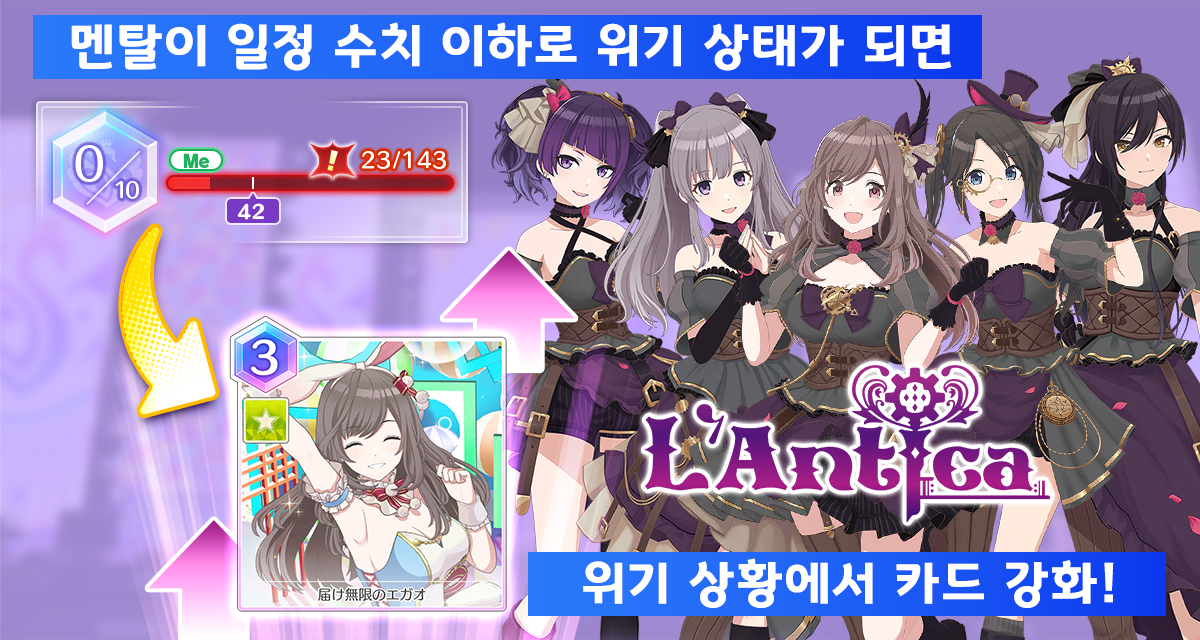
<style>
.page{position:relative;width:1200px;height:640px}
.page>*{position:absolute;margin:0}
.t1{font:50.7px "GyeonggiTitleB";letter-spacing:0.05em;color:#ffffff}
</style>
<div class="page">
<p class="t1" style="left:71px;top:22px;width:881px;height:49px">멘탈이 일정 수치 이하로 위기 상태가 되면</p>
<p class="t1" style="left:583px;top:558px;width:531px;height:50px">위기 상황에서 카드 강화!</p>
</div>
